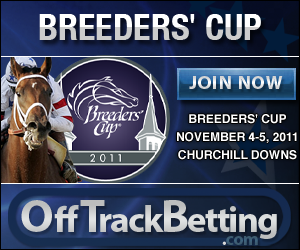
<style>
.page{position:relative;width:300px;height:250px}
.page>*{position:absolute;margin:0}
.t1{font:36px "HelveticaNeue-CondensedBold"}
.t2{font:36px "ArialMT"}
.t3{font:19px "MyriadPro-Bold";letter-spacing:0.05em;color:#e4e4e4}
.t4{font:12px/17.8px "Helvetica-Bold";color:#ffffff}
.t5{font:37.2px "MyriadPro-Bold";letter-spacing:-0.05em;color:#e0e2e2}
.t6{font:46.5px "MyriadPro-Bold";color:#e0e2e2}
.t7{font:37.2px "MyriadPro-Bold";letter-spacing:0.05em;color:#e0e2e2}
.t8{font:46.5px "MyriadPro-Bold";letter-spacing:-0.15em;color:#e0e2e2}
.t9{font:46.5px "MyriadPro-Bold";letter-spacing:-0.05em;color:#e0e2e2}
.t10{font:18.3px "MyriadPro-Bold";letter-spacing:-0.05em;color:#3e647e}
.t11{font:18.3px "MyriadPro-Bold";letter-spacing:-0.05em;color:#ffffff}
</style>
<div class="page">
<p class="t1" style="left:38px;top:9px;width:224px;height:43px">BREEDERS<span class="t2">'</span> CUP</p>
<p class="t3" style="left:189px;top:76px;width:94px;height:13px">JOIN NOW</p>
<p class="t4" style="left:176px;top:113px;width:123px;height:52px;text-align:center">BREEDERS' CUP<br>NOVEMBER 4-5, 2011<br>CHURCHILL DOWNS</p>
<p class="t5" style="left:21px;top:200px;width:256px;height:39px"><span class="t6">O</span><span class="t7">ff</span><span class="t8">T</span>rack<span class="t9">B</span>etting</p>
<p class="t10" style="left:222px;top:236px;width:36px;height:9px"><span class="t11">.</span>com</p>
</div>
